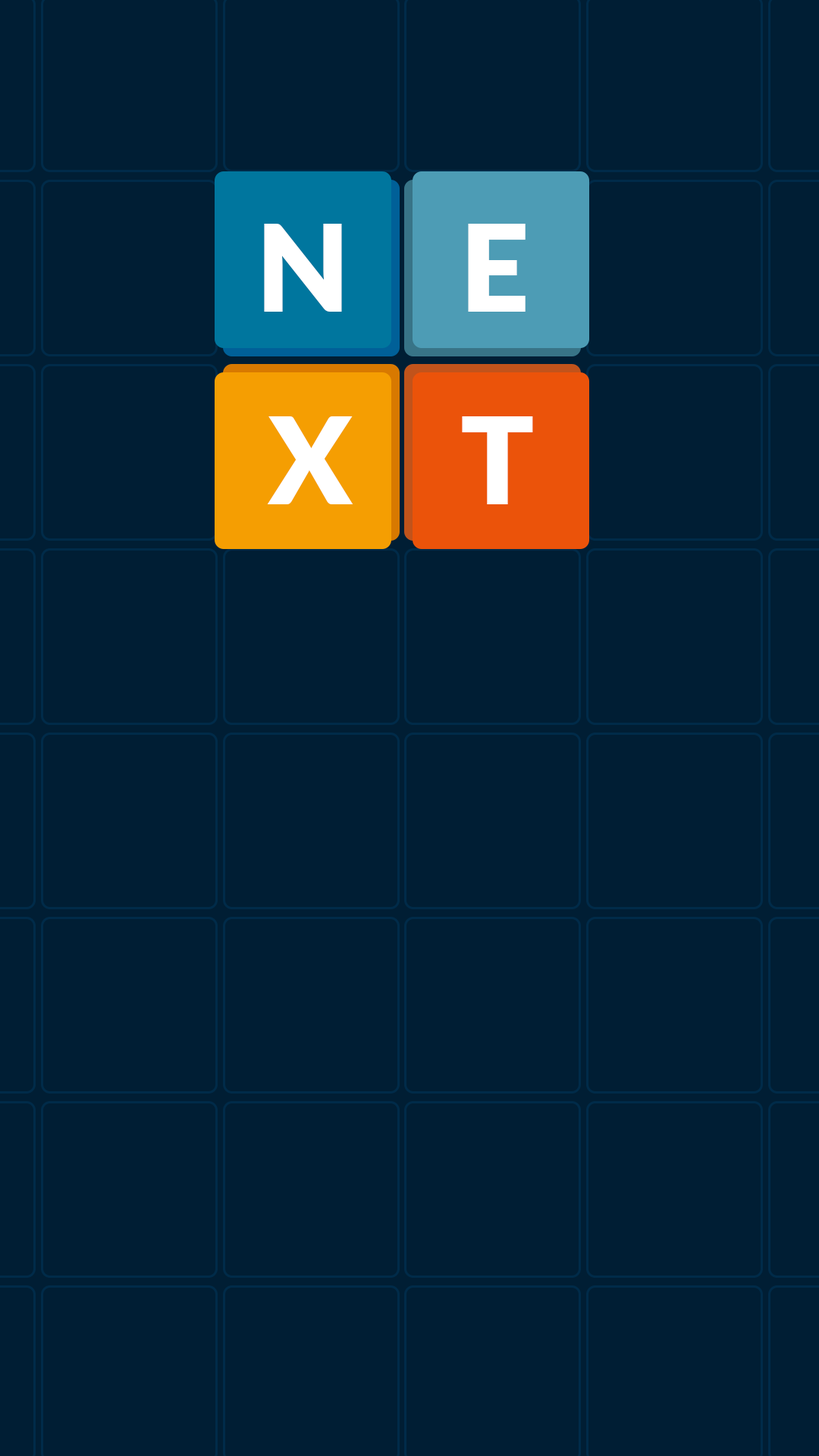
<style>
.page{position:relative;width:819px;height:1456px;background:#001e34}
.page>*{position:absolute;margin:0}
.t1{font:121.3px "Lato-Black";color:#ffffff}
</style>
<div class="page">
<p class="t1" style="left:264px;top:224px;width:78px;height:88px">N</p>
<p class="t1" style="left:468px;top:224px;width:58px;height:88px">E</p>
<p class="t1" style="left:267px;top:416px;width:86px;height:88px">X</p>
<p class="t1" style="left:462px;top:416px;width:71px;height:88px">T</p>
</div>
